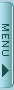
<style>
.page{position:relative;width:14px;height:90px}
.page>*{position:absolute;margin:0}
.t1{font:10px "CopperplateGothic-Light";letter-spacing:0.05em;color:#234d49}
</style>
<div class="page">
<p class="t1" style="left:2px;top:24px;width:7px;height:32px;rotate:90deg">MENU</p>
</div>
